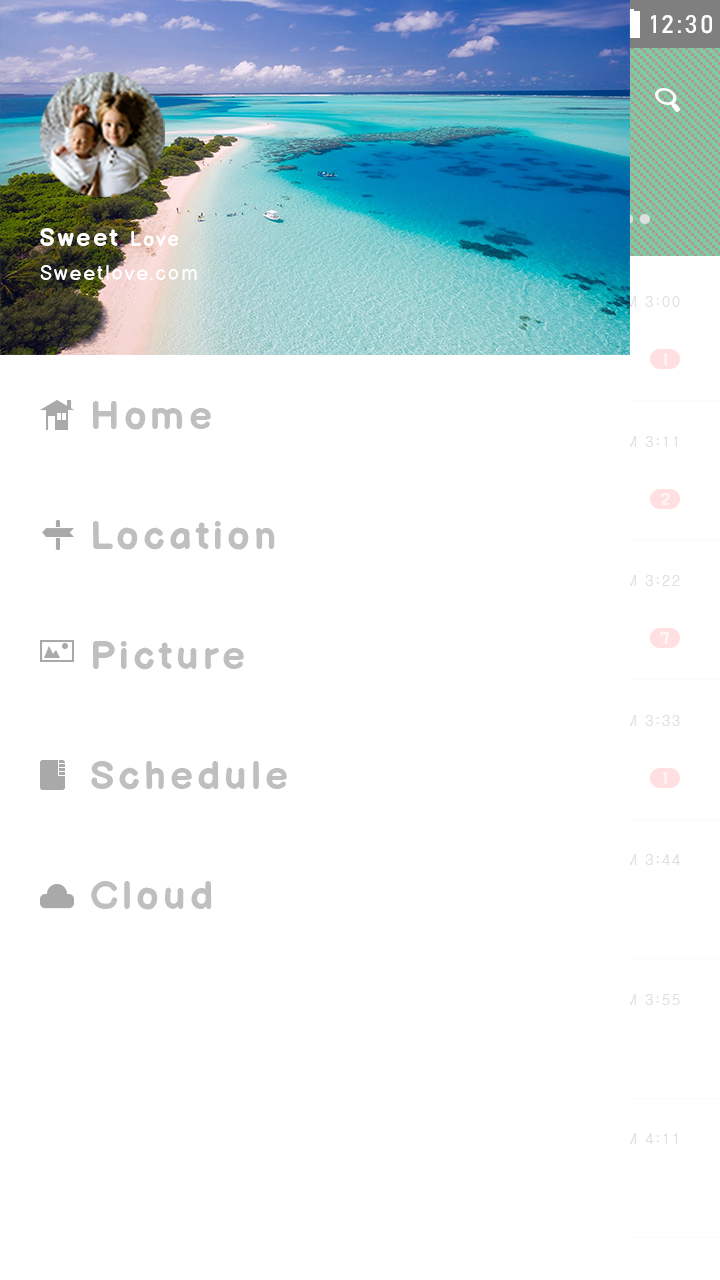
<style>
.page{position:relative;width:720px;height:1280px;background:#ffffff}
.page>*{position:absolute;margin:0}
.t1{font:25px "Bahnschrift";letter-spacing:0.1em;color:#ffffff}
.t2{font:25px "BalsamiqSans-Bold";letter-spacing:0.1em;color:#fefefe}
.t3{font:20px "BalsamiqSans-Bold";letter-spacing:0.1em;color:#fefefe}
.t4{font:20px "BalsamiqSans-Regular";letter-spacing:0.1em;color:#fefefe}
.t5{font:18px "DoHyeon-Regular";letter-spacing:0.1em;color:#ffffff}
.t6{font:40px "BalsamiqSans-Bold";letter-spacing:0.1em;color:#bfbfbf}
.t7{font:15px "Gulim";letter-spacing:0.1em}
</style>
<div class="page">
<p class="t1" style="left:651px;top:15px;width:61px;height:19px">12:30</p>
<p class="t2" style="left:40px;top:228px;width:139px;height:19px">Sweet <span class="t3">Love</span></p>
<p class="t4" style="left:40px;top:265px;width:157px;height:15px">Sweetlove.com</p>
<p class="t5" style="left:662px;top:353px;width:5px;height:12px;opacity:0.5">1</p>
<p class="t6" style="left:92px;top:401px;width:119px;height:29px">Home</p>
<p class="t7" style="left:615px;top:436px;width:62px;height:11px">PM 3:11</p>
<p class="t5" style="left:661px;top:493px;width:9px;height:12px;opacity:0.5">2</p>
<p class="t6" style="left:93px;top:521px;width:182px;height:29px">Location</p>
<p class="t7" style="left:615px;top:575px;width:65px;height:11px">PM 3:22</p>
<p class="t6" style="left:93px;top:641px;width:151px;height:29px">Picture</p>
<p class="t5" style="left:660px;top:632px;width:9px;height:12px;opacity:0.5">7</p>
<p class="t7" style="left:615px;top:715px;width:65px;height:11px">PM 3:33</p>
<p class="t6" style="left:91px;top:761px;width:196px;height:29px">Schedule</p>
<p class="t5" style="left:662px;top:772px;width:5px;height:12px;opacity:0.5">1</p>
<p class="t7" style="left:615px;top:854px;width:66px;height:11px">PM 3:44</p>
<p class="t6" style="left:91px;top:881px;width:121px;height:29px">Cloud</p>
<p class="t7" style="left:615px;top:994px;width:65px;height:11px">PM 3:55</p>
<p class="t7" style="left:615px;top:1133px;width:62px;height:11px">PM 4:11</p>
</div>
